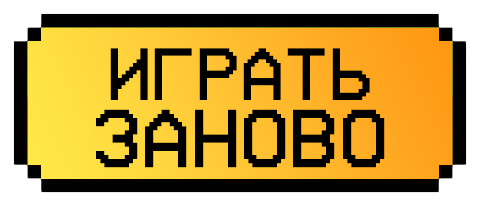
<style>
.page{position:relative;width:480px;height:206px;background:#ffffff}
.page>*{position:absolute;margin:0}
.t1{font:59.1px "VCROSDMonoRUSbyD";color:#000000}
.t2{font:65.8px "VCROSDMonoRUSbyD";color:#000000}
</style>
<div class="page">
<p class="t1" style="left:110px;top:48px;width:260px;height:52px">ИГРАТЬ</p>
<p class="t2" style="left:96px;top:109px;width:289px;height:59px">ЗАНОВО</p>
</div>
